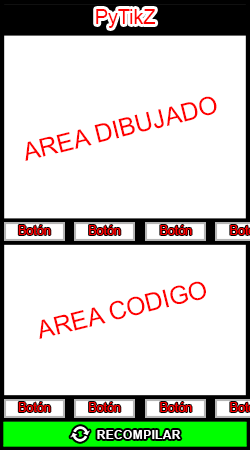
<style>
.page{position:relative;width:250px;height:450px;background:#ffffff}
.page>*{position:absolute;margin:0}
.t1{font:19.6px "ArialMT";color:#ff0000}
.t2{font:24.9px "ArialMT";color:#ff0000}
.t3{font:12.5px "ArialMT";color:#ff0000}
.t4{font:12.5px "Arial-BoldMT";color:#ffffff}
</style>
<div class="page">
<p class="t1" style="left:96px;top:9px;width:60px;height:19px">PyTikZ</p>
<p class="t2" style="left:25px;top:96px;width:192px;height:65px;rotate:-14deg">AREA DIBUJADO</p>
<p class="t3" style="left:18px;top:225px;width:33px;height:10px">Botón</p>
<p class="t3" style="left:89px;top:225px;width:32px;height:10px">Botón</p>
<p class="t3" style="left:160px;top:225px;width:32px;height:10px">Botón</p>
<p class="t2" style="left:39px;top:281px;width:167px;height:58px;rotate:-14deg">AREA CODIGO</p>
<p class="t3" style="left:18px;top:402px;width:33px;height:10px">Botón</p>
<p class="t3" style="left:89px;top:402px;width:32px;height:10px">Botón</p>
<p class="t3" style="left:160px;top:402px;width:32px;height:10px">Botón</p>
<p class="t4" style="left:97px;top:430px;width:84px;height:9px">RECOMPILAR</p>
</div>
